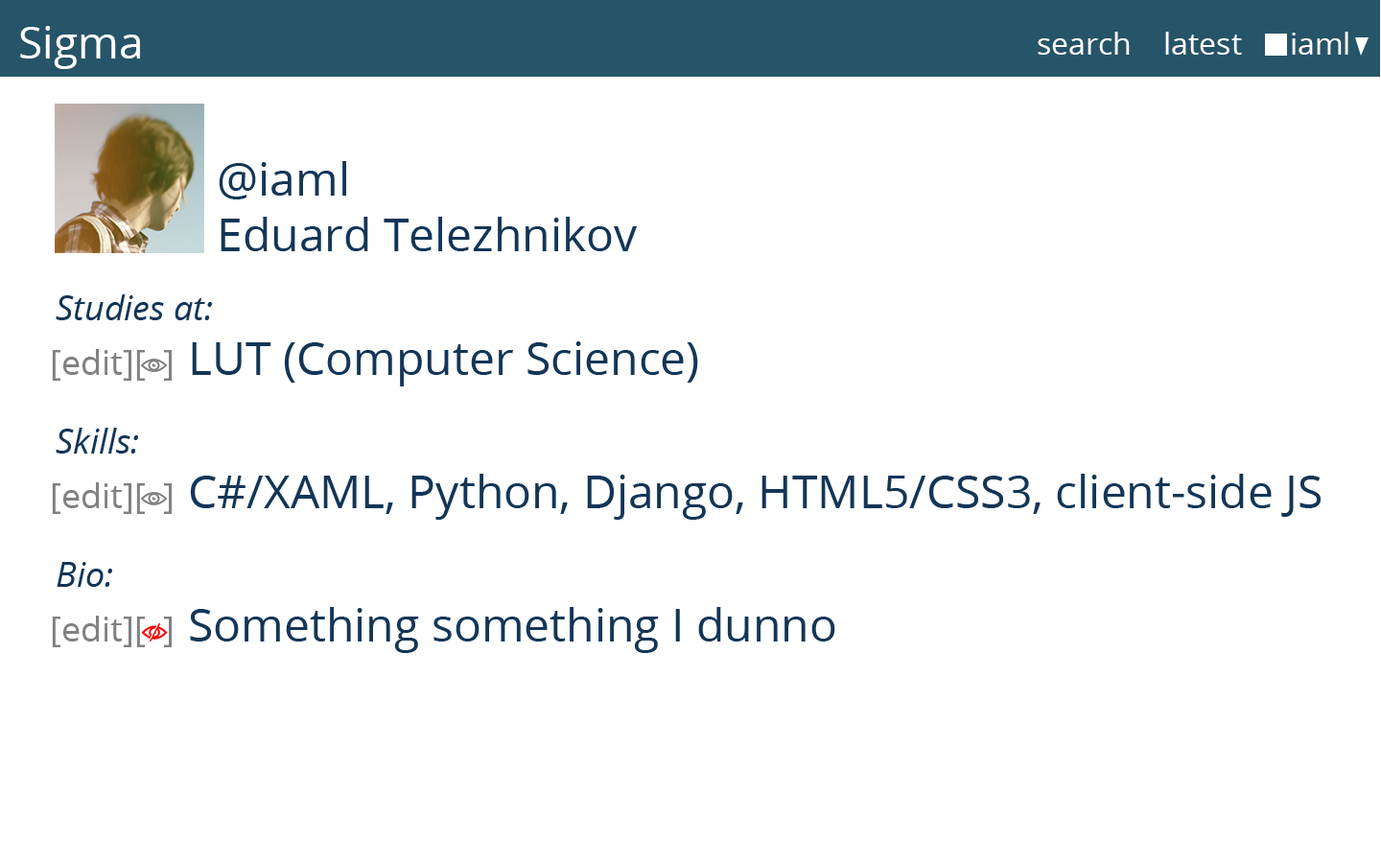
<style>
.page{position:relative;width:1381px;height:863px;background:#ffffff}
.page>*{position:absolute;margin:0}
.t1{font:44.1px "OpenSans";color:#ffffff}
.t2{font:30.7px "OpenSans";color:#ffffff}
.t3{font:46px "OpenSans";color:#133657}
.t4{font:34.5px "OpenSans-Italic";color:#133657}
.t5{font:34.5px "OpenSans";color:#818181}
</style>
<div class="page">
<p class="t1" style="left:20px;top:26px;width:120px;height:43px">Sigma</p>
<p class="t2" style="left:1038px;top:32px;width:311px;height:23px">search    latest      iaml</p>
<p class="t3" style="left:219px;top:161px;width:418px;height:90px">@iaml<br>Eduard Telezhnikov</p>
<p class="t4" style="left:56px;top:294px;width:156px;height:26px">Studies at:</p>
<p class="t3" style="left:52px;top:341px;width:646px;height:46px"><span class="t5">[edit][  ] </span>LUT (Computer Science)</p>
<p class="t4" style="left:56px;top:428px;width:82px;height:26px">Skills:</p>
<p class="t3" style="left:52px;top:474px;width:1269px;height:46px"><span class="t5">[edit][  ] </span>C#/XAML, Python, Django, HTML5/CSS3, client-side JS</p>
<p class="t4" style="left:57px;top:562px;width:55px;height:25px">Bio:</p>
<p class="t3" style="left:52px;top:607px;width:783px;height:46px"><span class="t5">[edit][  ] </span>Something something I dunno</p>
</div>
